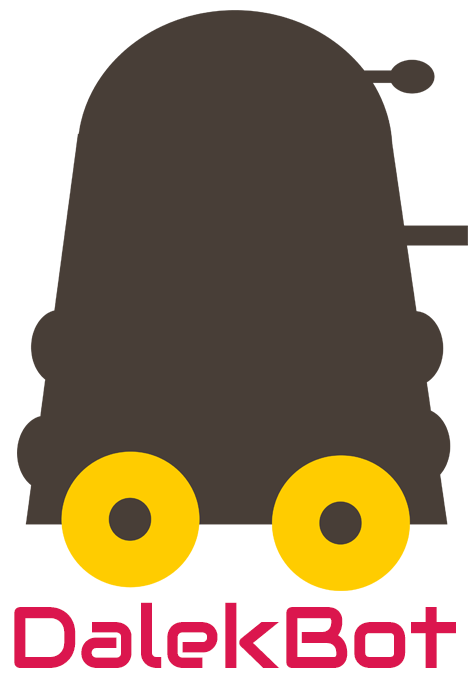
<style>
.page{position:relative;width:468px;height:678px;background:#483e37}
.page>*{position:absolute;margin:0}
.t1{font:86.9px "Audiowide-Regular";color:#db164e}
</style>
<div class="page">
<p class="t1" style="left:14px;top:602px;width:442px;height:66px">DalekBot</p>
</div>
